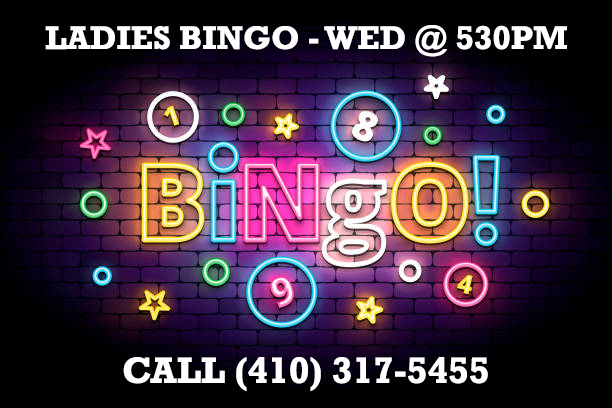
<style>
.page{position:relative;width:612px;height:408px;background:#010101}
.page>*{position:absolute;margin:0}
.t1{font:33.3px "Rockwell-Bold";color:#ffffff}
.t2{font:37.5px "Rockwell-Bold";color:#ffffff}
</style>
<div class="page">
<p class="t1" style="left:45px;top:25px;width:522px;height:32px">LADIES BINGO - WED @ 530PM</p>
<p class="t2" style="left:123px;top:357px;width:365px;height:35px">CALL (410) 317-5455</p>
</div>
